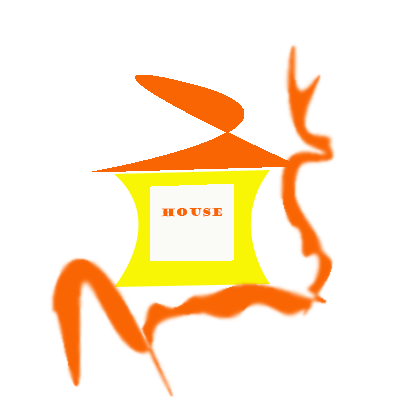
<style>
.page{position:relative;width:400px;height:400px;background:#ffffff}
.page>*{position:absolute;margin:0}
.t1{font:10.2px "GoudyStout";color:#f96503}
</style>
<div class="page">
<p class="t1" style="left:161px;top:208px;width:62px;height:9px">HOUSE</p>
</div>
